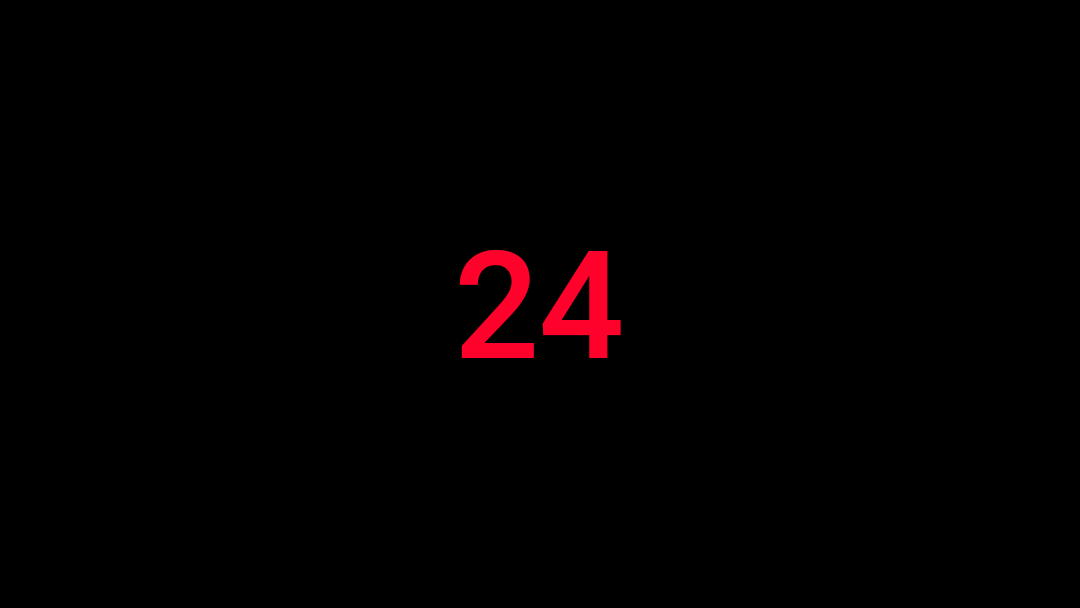
<style>
.page{position:relative;width:1080px;height:608px;background:#000000}
.page>*{position:absolute;margin:0}
.t1{font:150px "Roboto-Medium";color:#ff022c}
</style>
<div class="page">
<p class="t1" style="left:459px;top:250px;width:162px;height:108px">24</p>
</div>
